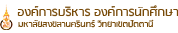
<style>
.page{position:relative;width:178px;height:33px;background:#ffffff}
.page>*{position:absolute;margin:0}
.t1{font:14.2px "RSU";color:#774a09}
.t2{font:9.9px "RSU";color:#774a09}
</style>
<div class="page">
<p class="t1" style="left:17px;top:5px;width:162px;height:12px">องค์การบริหาร องค์การนักศึกษา</p>
<p class="t2" style="left:18px;top:19px;width:136px;height:9px">มหาลัยสงขลานครินทร์ วิทยาเขตปัตตานี</p>
</div>
